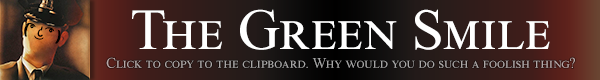
<style>
.page{position:relative;width:600px;height:80px}
.page>*{position:absolute;margin:0}
.t1{font:58.1px "TimesNewRomanPSMT";color:#ffffff;font-variant:small-caps}
.t2{font:14.3px "ArialMT";color:#000000;font-variant:small-caps;scale:0.86 1}
.t3{font:14.3px "Arial-Black";color:#000000;font-variant:small-caps;scale:0.86 1}
.t4{font:14.5px "TimesNewRomanPSMT";color:#aaa8a8;font-variant:small-caps}
</style>
<div class="page">
<p class="t1" style="left:132px;top:9px;width:418px;height:41px">The Green Smile</p>
<p class="t2" style="left:24px;top:23px;width:37px;height:21px;rotate:-167deg"><span class="t3">( </span>͡<span class="t3">° </span>͜ʖ ͡<span class="t3">°)</span></p>
<p class="t4" style="left:106px;top:57px;width:469px;height:11px">Click to copy to the clipboard. Why would you do such a foolish thing?</p>
</div>
